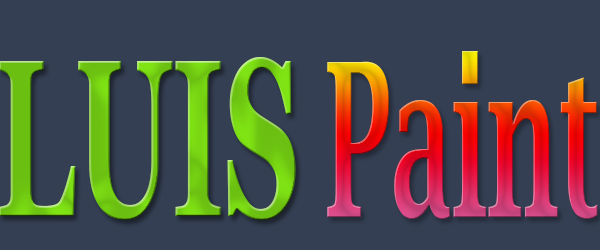
<style>
.page{position:relative;width:600px;height:250px;background:#343f53}
.page>*{position:absolute;margin:0}
.t1{font:214.7px "LucidaBright-Demi";scale:0.5 1}
.t2{font:224.4px "Georgia-Bold";color:#70c811;scale:0.52 1}
</style>
<div class="page">
<p class="t1" style="left:327px;top:51px;width:271px;height:168px">Paint</p>
<p class="t2" style="left:0px;top:57px;width:296px;height:163px">LUIS</p>
</div>
